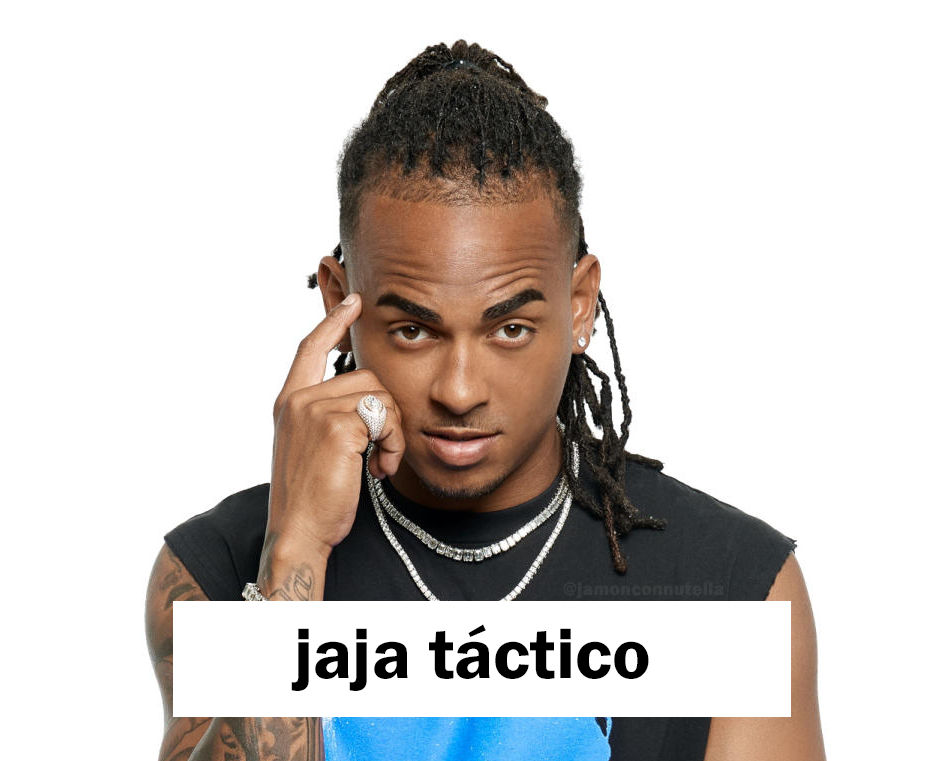
<style>
.page{position:relative;width:942px;height:761px;background:#ffffff}
.page>*{position:absolute;margin:0}
.t1{font:18.6px "FranklinGothic-Heavy";color:#383c3e}
.t2{font:72.3px "FranklinGothic-Demi";color:#000000}
</style>
<div class="page">
<p class="t1" style="left:563px;top:582px;width:161px;height:17px">@jamonconnutella</p>
<p class="t2" style="left:291px;top:624px;width:358px;height:67px">jaja táctico</p>
</div>
